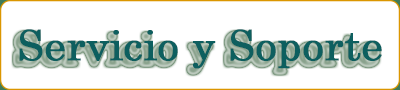
<style>
.page{position:relative;width:400px;height:90px;background:#ffffff}
.page>*{position:absolute;margin:0}
.t1{font:41.7px "Century";color:#0d5f5f;font-weight:bold}
</style>
<div class="page">
<p class="t1" style="left:19px;top:29px;width:363px;height:40px">Servicio y Soporte</p>
</div>
